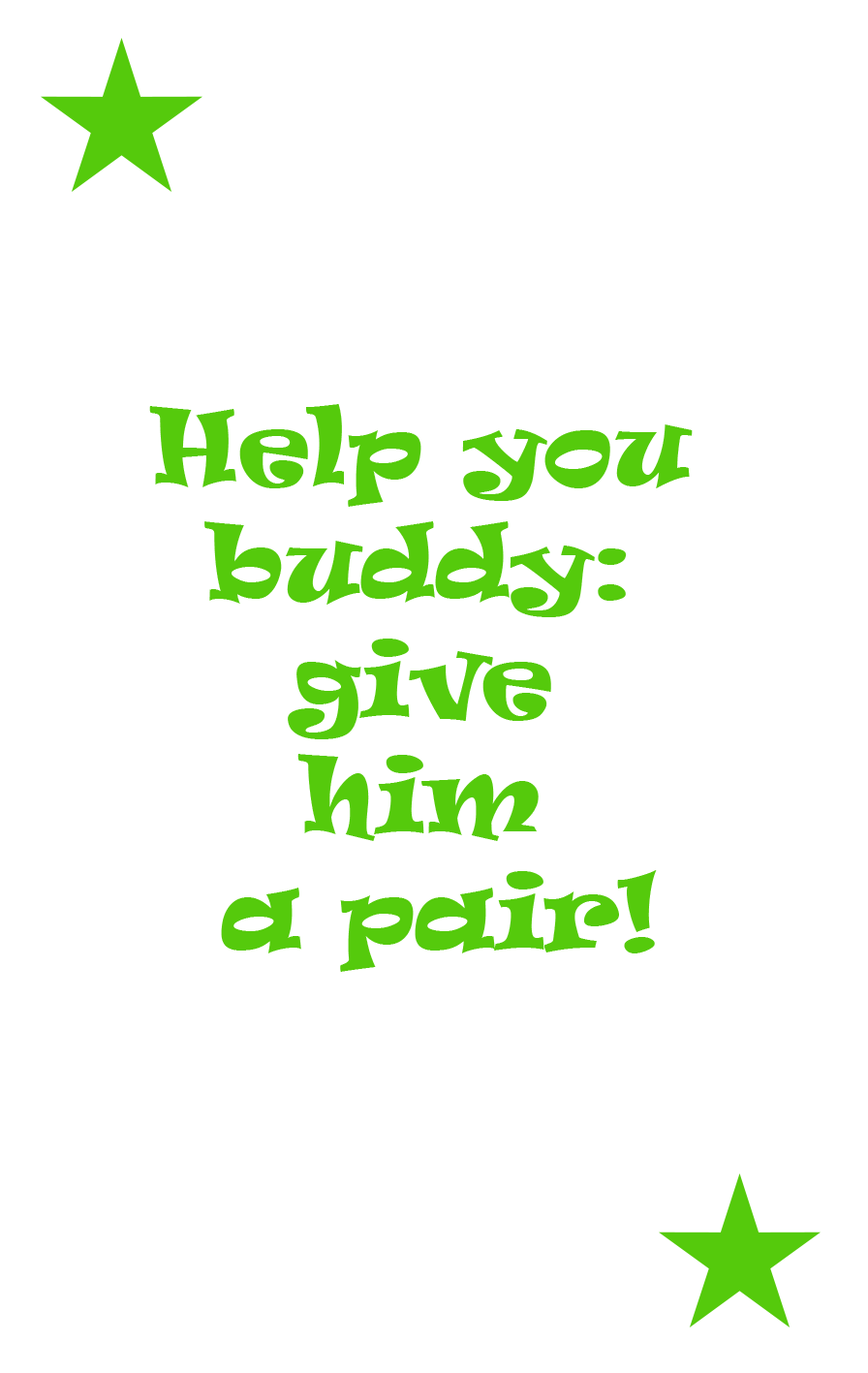
<style>
.page{position:relative;width:868px;height:1373px;background:#ffffff}
.page>*{position:absolute;margin:0}
.t1{font:96.9px "Ravie";color:#55ca0c}
</style>
<div class="page">
<p class="t1" style="left:149px;top:404px;width:544px;height:568px;text-align:center">Help you <br>buddy: <br>give <br>him <br>a pair!</p>
</div>
